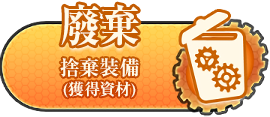
<style>
.page{position:relative;width:270px;height:117px;background:#ffffff}
.page>*{position:absolute;margin:0}
.t1{font:44px "RyuminPro-ExBold";color:#fffae7;scale:0.91 1}
.t2{font:16px/20px "RyuminPro-ExBold";color:#fffae7}
.t3{font:20px/20px "RyuminPro-ExBold";color:#fffae7}
</style>
<div class="page">
<p class="t1" style="left:61px;top:4px;width:78px;height:42px">廢棄</p>
<p class="t2" style="left:60px;top:58px;width:79px;height:40px;text-align:center"><span class="t3">捨棄裝備<br></span>(獲得資材)</p>
</div>
